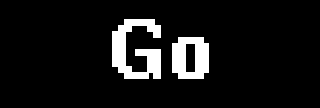
<style>
.page{position:relative;width:320px;height:108px;background:#000000}
.page>*{position:absolute;margin:0}
.t1{font:75px "System";letter-spacing:0.01em;color:#ffffff;font-weight:bold}
</style>
<div class="page">
<p class="t1" style="left:112px;top:19px;width:97px;height:60px">Go</p>
</div>
